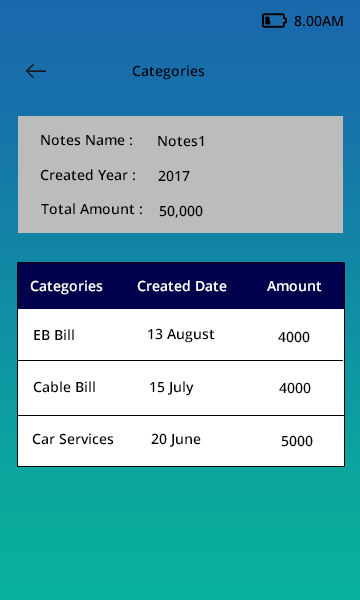
<style>
.page{position:relative;width:360px;height:600px;background:#ffffff}
.page>*{position:absolute;margin:0}
.t1{font:14px "OpenSans-Semibold";color:#000000}
.t2{font:14px "OpenSans-Semibold";color:#ffffff}
</style>
<div class="page">
<p class="t1" style="left:294px;top:15px;width:49px;height:12px">8.00AM</p>
<p class="t1" style="left:132px;top:65px;width:73px;height:15px">Categories</p>
<p class="t1" style="left:41px;top:135px;width:91px;height:11px">Notes Name :</p>
<p class="t1" style="left:158px;top:136px;width:46px;height:11px">Notes1</p>
<p class="t1" style="left:40px;top:169px;width:95px;height:12px">Created Year :</p>
<p class="t1" style="left:158px;top:170px;width:32px;height:12px">2017</p>
<p class="t1" style="left:41px;top:203px;width:101px;height:12px">Total Amount :</p>
<p class="t1" style="left:159px;top:205px;width:44px;height:13px">50,000</p>
<p class="t2" style="left:30px;top:280px;width:73px;height:15px">Categories</p>
<p class="t2" style="left:137px;top:280px;width:90px;height:12px">Created Date</p>
<p class="t2" style="left:267px;top:281px;width:55px;height:11px">Amount</p>
<p class="t1" style="left:34px;top:329px;width:40px;height:11px">EB Bill</p>
<p class="t1" style="left:148px;top:328px;width:67px;height:15px">13 August</p>
<p class="t1" style="left:278px;top:331px;width:32px;height:12px">4000</p>
<p class="t1" style="left:33px;top:381px;width:62px;height:12px">Cable Bill</p>
<p class="t1" style="left:150px;top:381px;width:44px;height:15px">15 July</p>
<p class="t1" style="left:279px;top:382px;width:32px;height:12px">4000</p>
<p class="t1" style="left:32px;top:433px;width:82px;height:12px">Car Services</p>
<p class="t1" style="left:151px;top:433px;width:50px;height:14px">20 June</p>
<p class="t1" style="left:281px;top:435px;width:32px;height:12px">5000</p>
</div>
